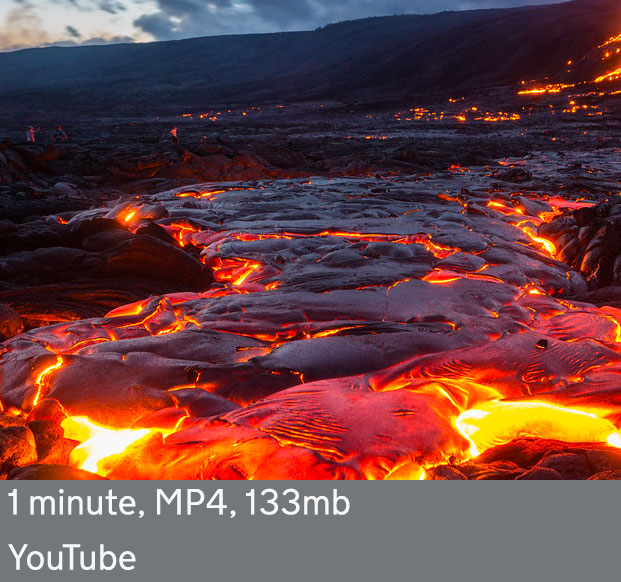
<style>
.page{position:relative;width:621px;height:582px}
.page>*{position:absolute;margin:0}
.t1{font:36px "NTA-Light";color:#f9f8f8}
</style>
<div class="page">
<p class="t1" style="left:8px;top:488px;width:342px;height:82px">1 minute, MP4, 133mb<br>YouTube</p>
</div>
